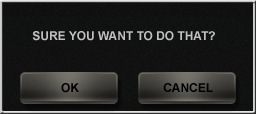
<style>
.page{position:relative;width:256px;height:114px}
.page>*{position:absolute;margin:0}
.t1{font:12px "Arial-BoldMT";color:#c1c1c1}
</style>
<div class="page">
<p class="t1" style="left:32px;top:31px;width:183px;height:10px">SURE YOU WANT TO DO THAT?</p>
</div>
